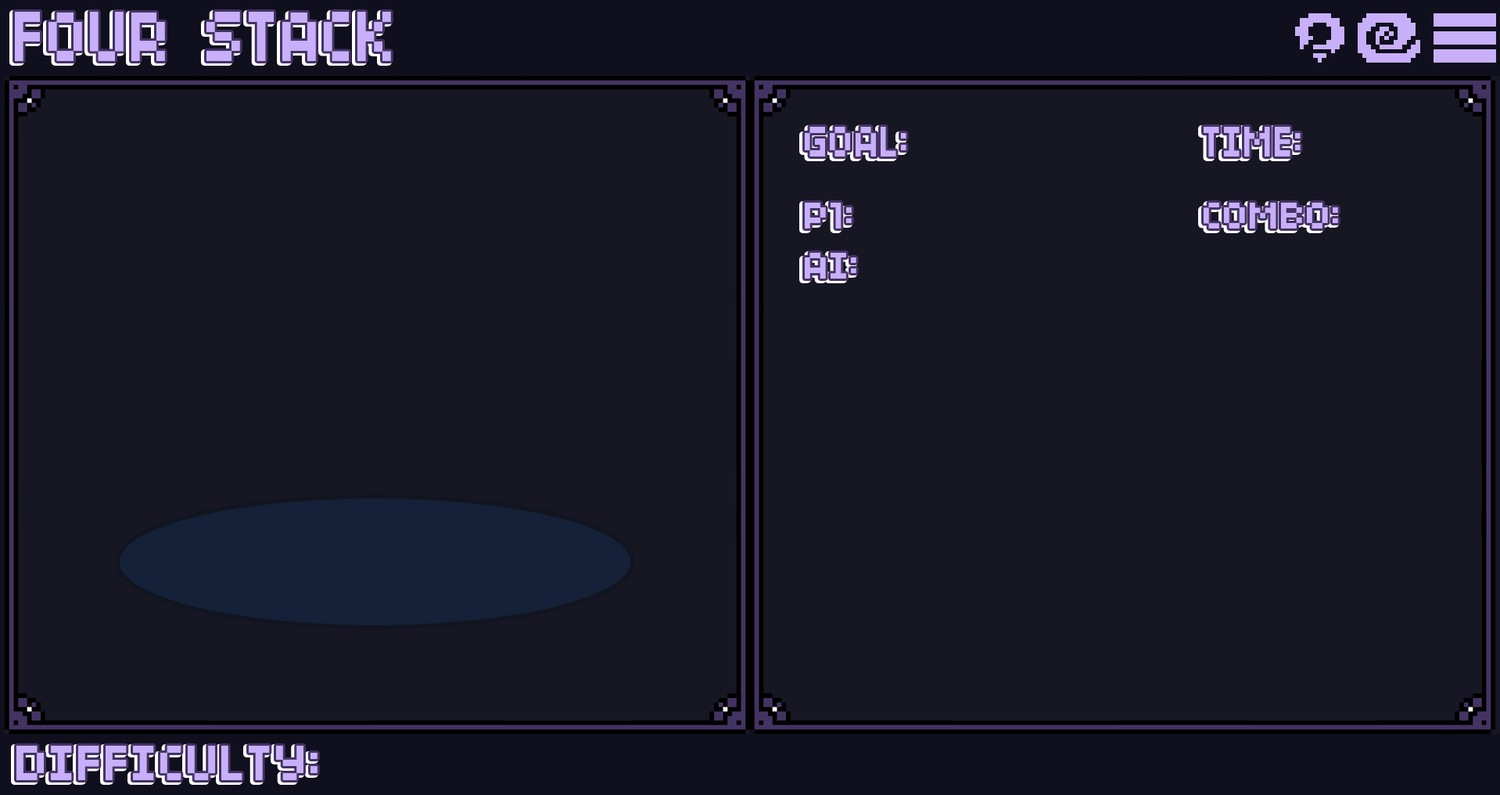
<style>
.page{position:relative;width:1500px;height:795px;background:#171623}
.page>*{position:absolute;margin:0}
.t1{font:47.1px "04b03";color:#c8aff9;scale:0.86 1}
.t2{font:41.5px "04b03";color:#c8aff9}
.t3{font:54.8px "04b03";color:#c8aff9}
</style>
<div class="page">
<p class="t1" style="left:805px;top:127px;width:102px;height:29px">GOAL:</p>
<p class="t1" style="left:1204px;top:127px;width:97px;height:29px">TIME:</p>
<p class="t2" style="left:805px;top:203px;width:52px;height:75px">P1:<br>AI:</p>
<p class="t2" style="left:1204px;top:203px;width:134px;height:25px">COMBO:</p>
<p class="t3" style="left:16px;top:745px;width:302px;height:35px">DIFFICULTY:</p>
</div>
